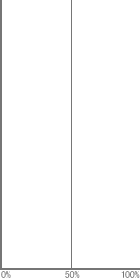
<style>
.page{position:relative;width:140px;height:280px;background:#ffffff}
.page>*{position:absolute;margin:0}
.t1{font:10px "MS-PGothic";color:#767676}
.t2{font:10px "MS-PGothic"}
</style>
<div class="page">
<p class="t1" style="left:1px;top:271px;width:10px;height:7px">0%</p>
<p class="t2" style="left:65px;top:271px;width:15px;height:7px">50%</p>
<p class="t1" style="left:121px;top:271px;width:19px;height:7px">100%</p>
</div>
